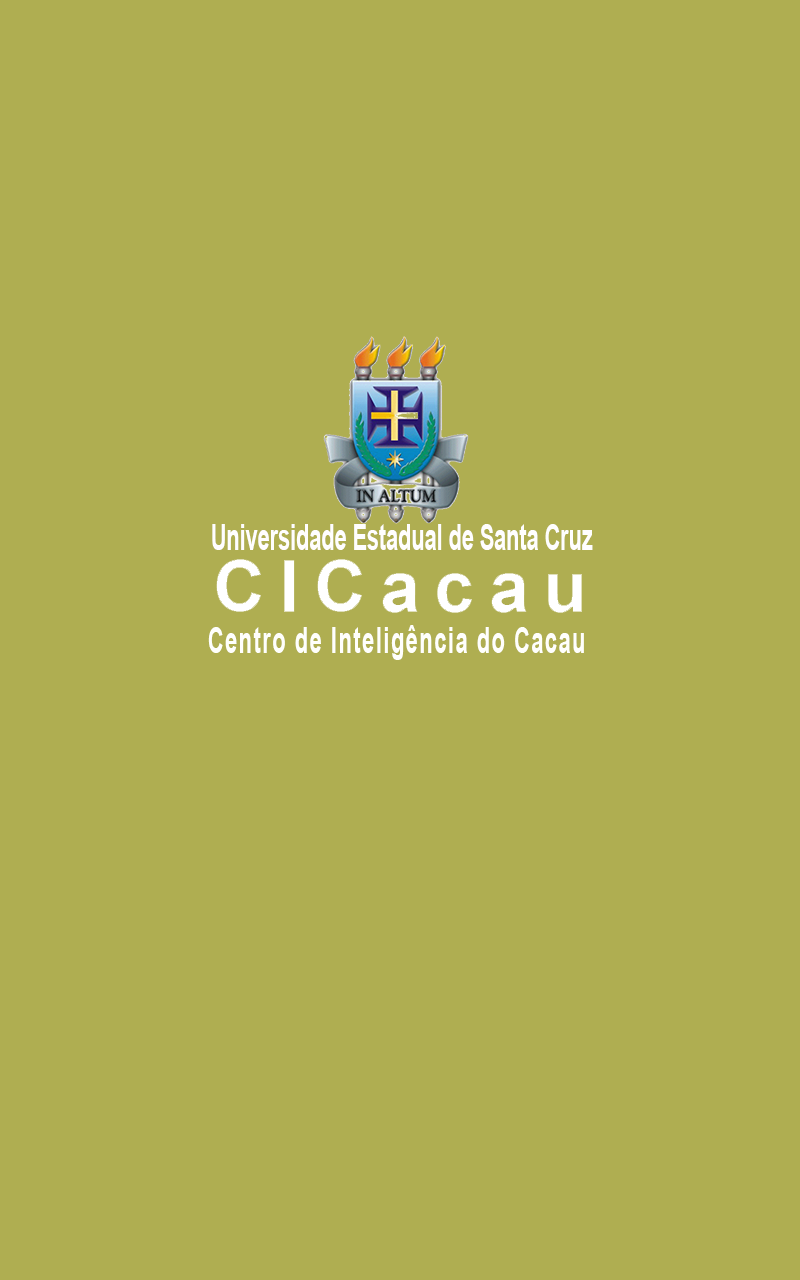
<style>
.page{position:relative;width:800px;height:1280px;background:#afae51}
.page>*{position:absolute;margin:0}
.t1{font:36px "Arial-BoldMT";color:#fffefe;scale:0.6 1}
.t2{font:36px "Arial-BoldMT";letter-spacing:0.075em;color:#fffffc;scale:0.6 1}
</style>
<div class="page">
<p class="t1" style="left:212px;top:524px;width:381px;height:26px">Universidade Estadual de Santa Cruz</p>
<p class="t2" style="left:208px;top:625px;width:376px;height:35px">Centro de Inteligência do Cacau</p>
</div>
